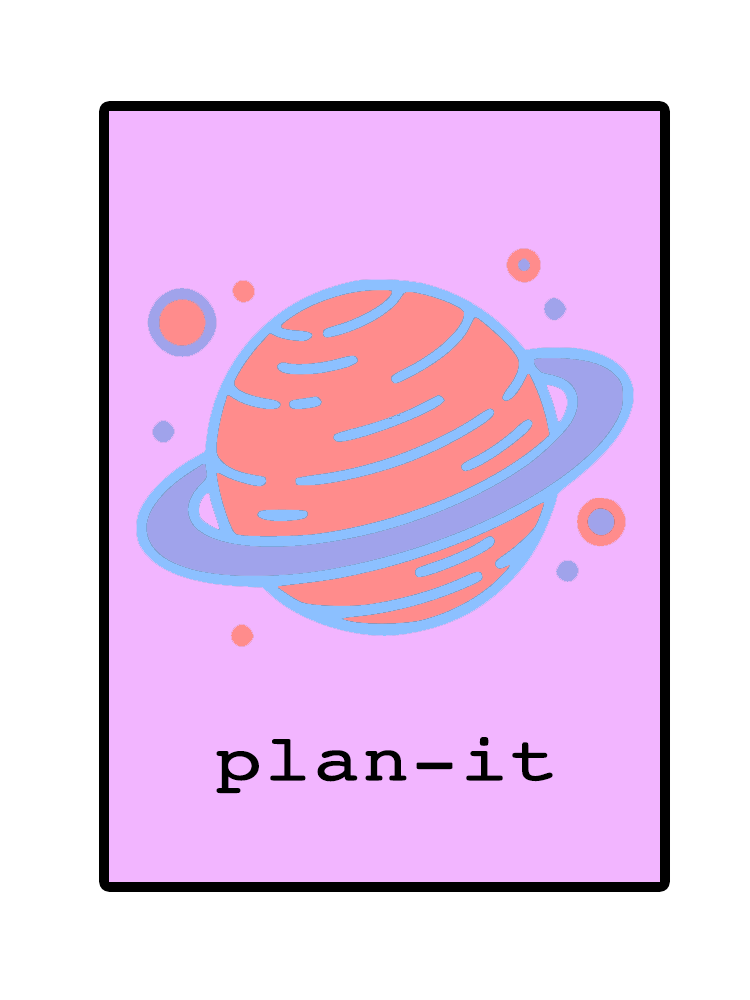
<style>
.page{position:relative;width:750px;height:1000px;background:#ffffff}
.page>*{position:absolute;margin:0}
.t1{font:64px "Courier";color:#000000;font-weight:bold;scale:1.23 1}
</style>
<div class="page">
<p class="t1" style="left:216px;top:737px;width:337px;height:57px">plan-it</p>
</div>
